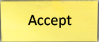
<style>
.page{position:relative;width:99px;height:42px}
.page>*{position:absolute;margin:0}
.t1{font:15.8px "Calibri";color:#000000}
</style>
<div class="page">
<p class="t1" style="left:28px;top:14px;width:44px;height:14px">Accept</p>
</div>
